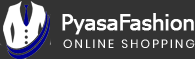
<style>
.page{position:relative;width:195px;height:59px;background:#333333}
.page>*{position:absolute;margin:0}
.t1{font:21.4px "Tahoma";color:#ffffff;font-weight:bold}
</style>
<div class="page">
<p class="t1" style="left:62px;top:13px;width:132px;height:22px">PyasaFashion</p>
</div>
